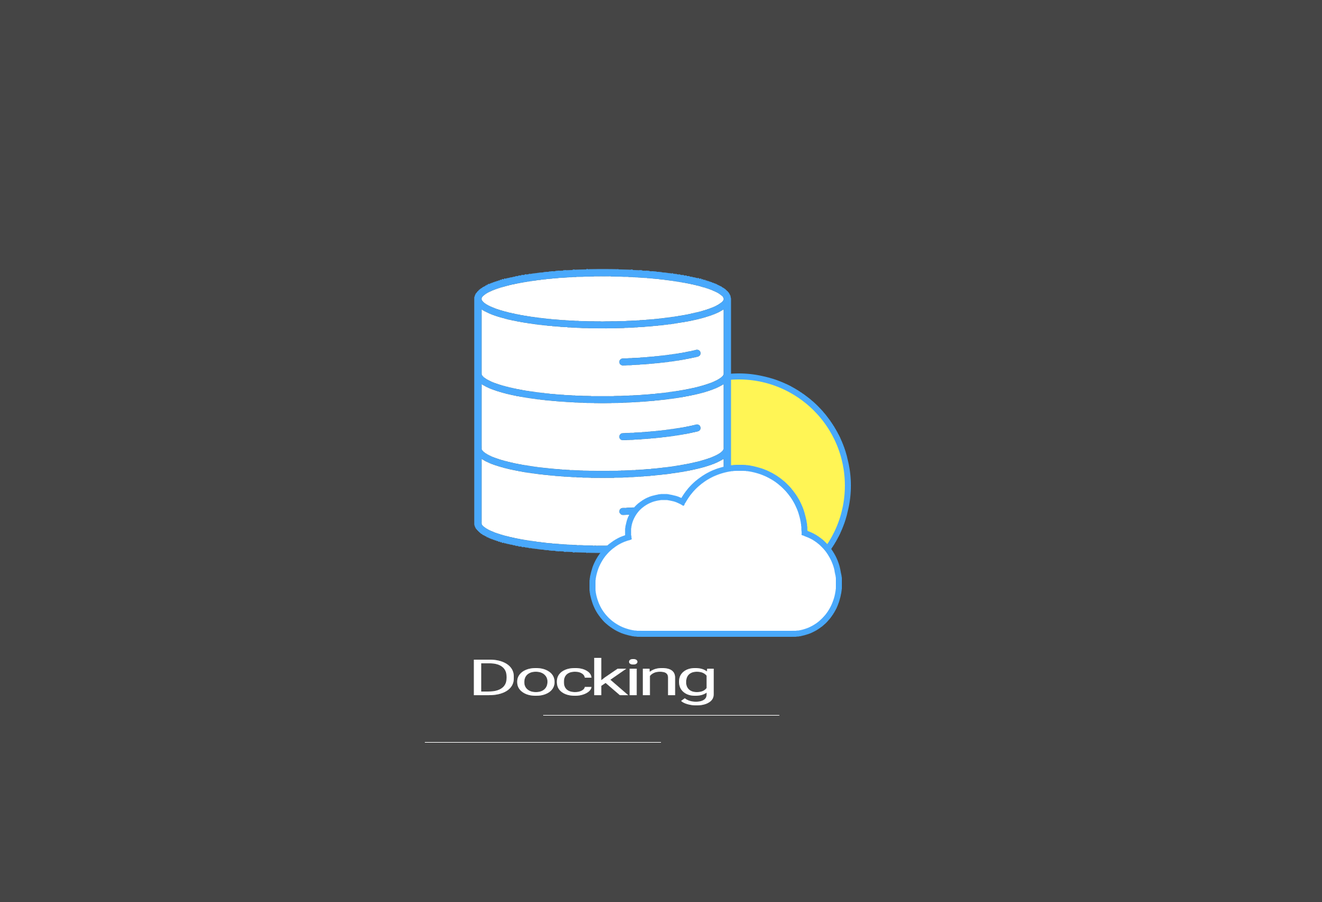
<style>
.page{position:relative;width:1322px;height:902px;background:#454545}
.page>*{position:absolute;margin:0}
.t1{font:49.9px "Roboto-Regular";letter-spacing:-0.06em;color:#ffffff;scale:1.55 1}
</style>
<div class="page">
<p class="t1" style="left:474px;top:658px;width:240px;height:47px">Docking</p>
</div>
